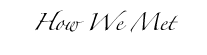
<style>
.page{position:relative;width:207px;height:55px;background:#ffffff}
.page>*{position:absolute;margin:0}
.t1{font:15.3px "Zapfino";color:#000000}
</style>
<div class="page">
<p class="t1" style="left:35px;top:10px;width:143px;height:23px">How We Met</p>
</div>
